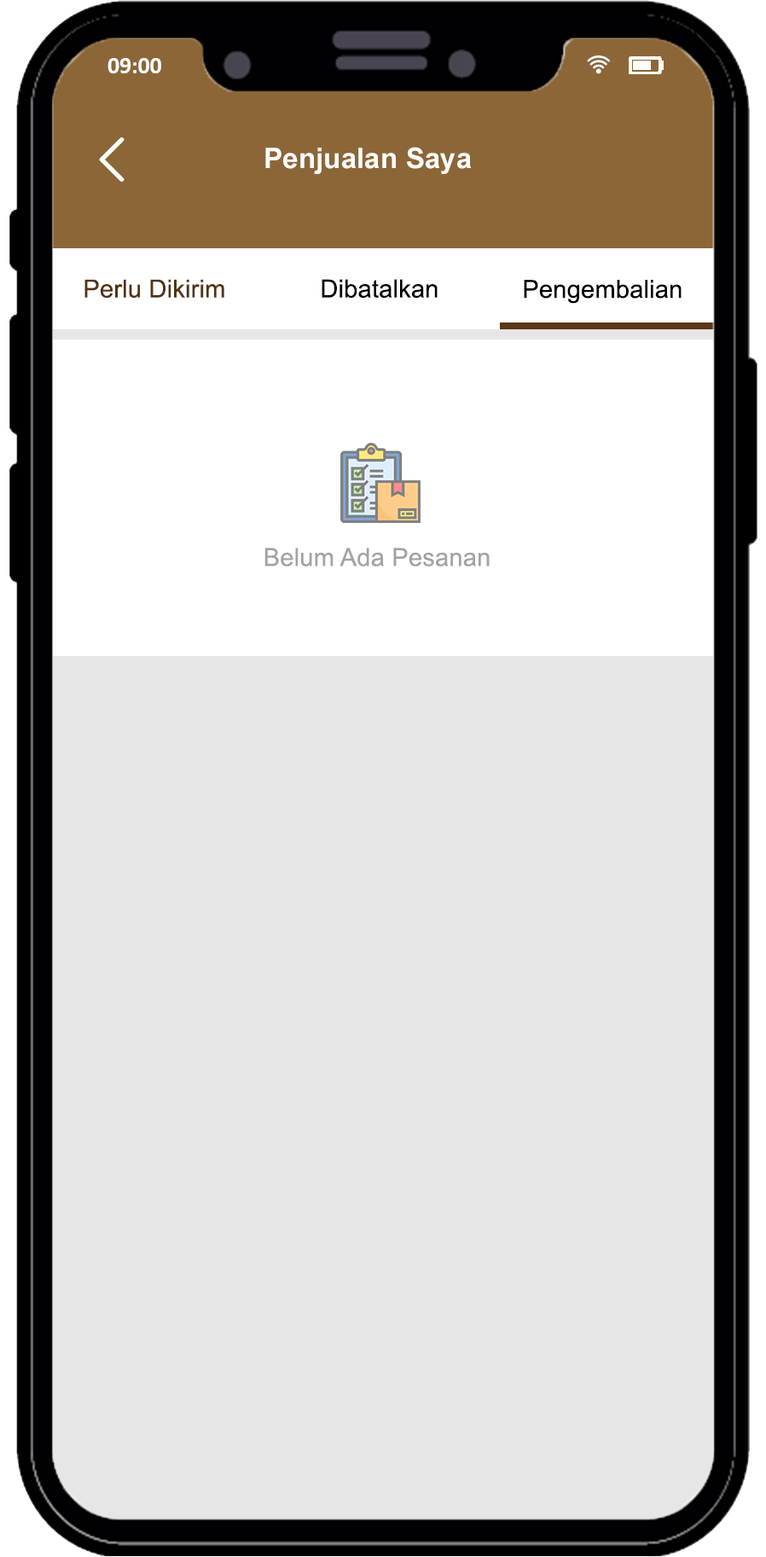
<style>
.page{position:relative;width:766px;height:1557px;background:#e6e6e6}
.page>*{position:absolute;margin:0}
.t1{font:23.6px "Calibri-Bold";color:#ffffff}
.t2{font:28.4px "Arial-BoldMT";color:#ffffff}
.t3{font:24.9px "ArialMT";letter-spacing:0.005em;color:#533213}
.t4{font:24.9px "ArialMT";letter-spacing:0.005em;color:#000000}
.t5{font:24.9px "ArialMT";letter-spacing:0.005em;color:#a3a3a3}
</style>
<div class="page">
<p class="t1" style="left:107px;top:58px;width:54px;height:15px">09:00</p>
<p class="t2" style="left:265px;top:147px;width:207px;height:27px">Penjualan Saya</p>
<p class="t3" style="left:84px;top:279px;width:140px;height:19px">Perlu Dikirim</p>
<p class="t4" style="left:322px;top:279px;width:116px;height:19px">Dibatalkan</p>
<p class="t4" style="left:524px;top:280px;width:158px;height:24px">Pengembalian</p>
<p class="t5" style="left:264px;top:548px;width:226px;height:18px">Belum Ada Pesanan</p>
</div>
